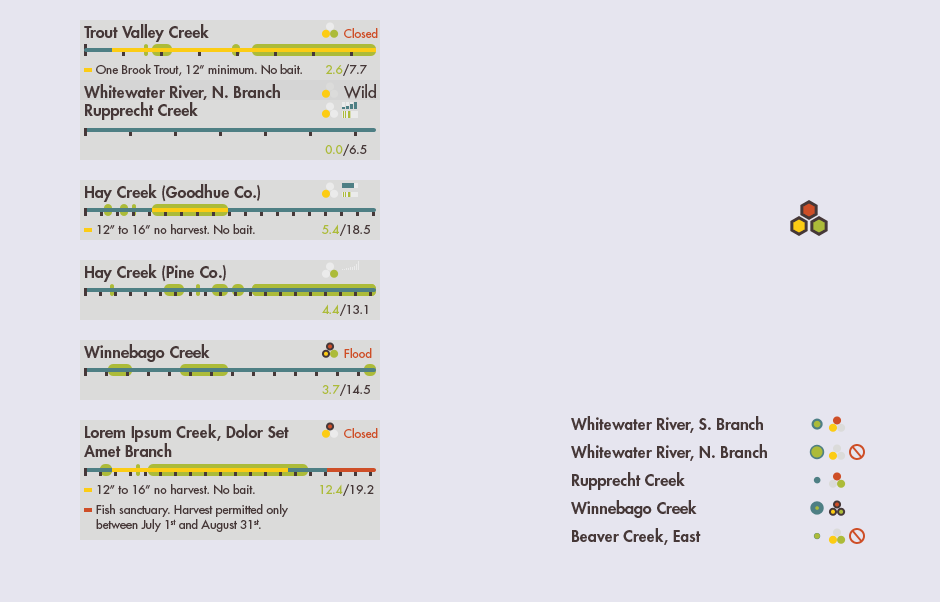
<style>
.page{position:relative;width:940px;height:602px;background:#e6e5ef}
.page>*{position:absolute;margin:0}
.t1{font:16px "FuturaStd-Heavy";color:#463838}
.t2{font:12px "FuturaStd-Medium";color:#ce4e27}
.t3{font:12px "FuturaStd-Medium";color:#463838}
.t4{font:12px "FuturaStd-Medium";color:#acbb39}
.t5{font:16px "FuturaStd-Medium";color:#463838}
</style>
<div class="page">
<p class="t1" style="left:84px;top:24px;width:125px;height:18px">Trout Valley Creek</p>
<p class="t2" style="left:344px;top:28px;width:34px;height:10px">Closed</p>
<p class="t3" style="left:96px;top:64px;width:206px;height:12px">One Brook Trout, 12” minimum. No bait.</p>
<p class="t3" style="left:326px;top:64px;width:41px;height:12px"><span class="t4">2.6</span>/7.7</p>
<p class="t1" style="left:84px;top:84px;width:196px;height:17px">Whitewater River, N. Branch</p>
<p class="t5" style="left:344px;top:84px;width:32px;height:15px">Wild</p>
<p class="t1" style="left:85px;top:102px;width:113px;height:18px">Rupprecht Creek</p>
<p class="t3" style="left:325px;top:144px;width:42px;height:12px"><span class="t4">0.0</span>/6.5</p>
<p class="t1" style="left:85px;top:184px;width:175px;height:18px">Hay Creek (Goodhue Co.)</p>
<p class="t3" style="left:97px;top:224px;width:158px;height:11px">12” to 16” no harvest. No bait.</p>
<p class="t3" style="left:322px;top:224px;width:48px;height:12px"><span class="t4">5.4</span>/18.5</p>
<p class="t1" style="left:85px;top:264px;width:141px;height:18px">Hay Creek (Pine Co.)</p>
<p class="t3" style="left:322px;top:304px;width:46px;height:12px"><span class="t4">4.4</span>/13.1</p>
<p class="t1" style="left:84px;top:344px;width:126px;height:18px">Winnebago Creek</p>
<p class="t2" style="left:344px;top:348px;width:28px;height:10px">Flood</p>
<p class="t3" style="left:322px;top:384px;width:48px;height:12px"><span class="t4">3.7</span>/14.5</p>
<p class="t1" style="left:84px;top:424px;width:205px;height:33px">Lorem Ipsum Creek, Dolor Set Amet Branch</p>
<p class="t1" style="left:571px;top:416px;width:192px;height:17px">Whitewater River, S. Branch</p>
<p class="t2" style="left:344px;top:428px;width:34px;height:10px">Closed</p>
<p class="t1" style="left:571px;top:444px;width:196px;height:17px">Whitewater River, N. Branch</p>
<p class="t1" style="left:572px;top:472px;width:113px;height:18px">Rupprecht Creek</p>
<p class="t3" style="left:97px;top:484px;width:158px;height:11px">12” to 16” no harvest. No bait.</p>
<p class="t3" style="left:320px;top:484px;width:54px;height:12px"><span class="t4">12.4</span>/19.2</p>
<p class="t3" style="left:96px;top:504px;width:192px;height:28px">Fish sanctuary. Harvest permitted only between July 1st and August 31st.</p>
<p class="t1" style="left:571px;top:500px;width:126px;height:18px">Winnebago Creek</p>
<p class="t1" style="left:572px;top:528px;width:129px;height:17px">Beaver Creek, East</p>
</div>
